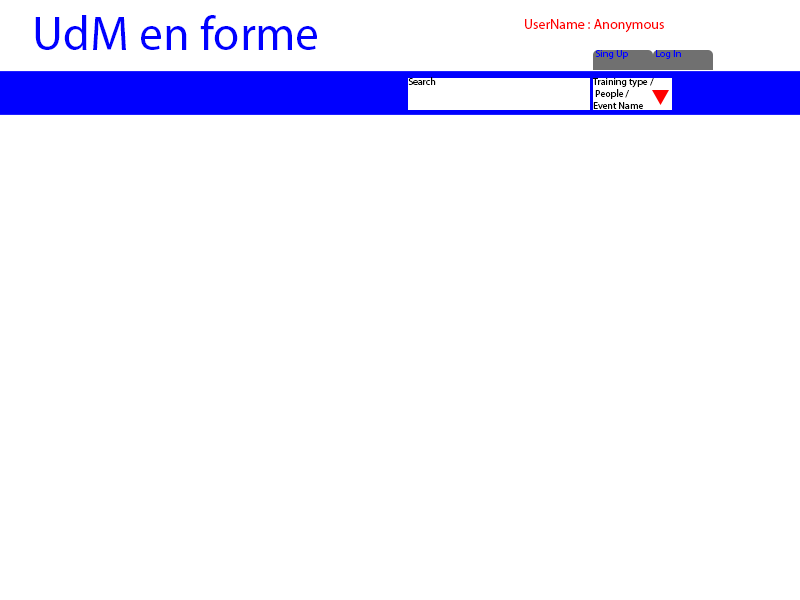
<style>
.page{position:relative;width:800px;height:600px;background:#ffffff}
.page>*{position:absolute;margin:0}
.t1{font:48px "MyriadPro-Regular";color:#0000ff}
.t2{font:14px "MyriadPro-Regular";color:#ff0000}
.t3{font:10px "MyriadPro-Regular";color:#0000ff}
.t4{font:10px "MyriadPro-Regular";color:#000000}
</style>
<div class="page">
<p class="t1" style="left:35px;top:15px;width:282px;height:35px">UdM en forme</p>
<p class="t2" style="left:525px;top:19px;width:139px;height:14px">UserName : Anonymous</p>
<p class="t3" style="left:595px;top:50px;width:33px;height:9px">Sing Up</p>
<p class="t3" style="left:656px;top:50px;width:25px;height:9px">Log In</p>
<p class="t4" style="left:408px;top:77px;width:28px;height:8px">Search</p>
<p class="t4" style="left:592px;top:78px;width:62px;height:31px">Training type /<br> People /<br>Event Name</p>
</div>
